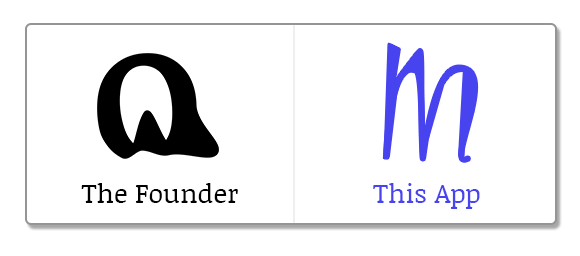
<style>
.page{position:relative;width:580px;height:256px;background:#ffffff}
.page>*{position:absolute;margin:0}
.t1{font:27px "NoticiaText-Regular";color:#000000}
.t2{font:27px "NoticiaText-Regular";color:#4743ef}
</style>
<div class="page">
<p class="t1" style="left:81px;top:183px;width:157px;height:20px">The Founder</p>
<p class="t2" style="left:373px;top:183px;width:107px;height:26px">This App</p>
</div>
